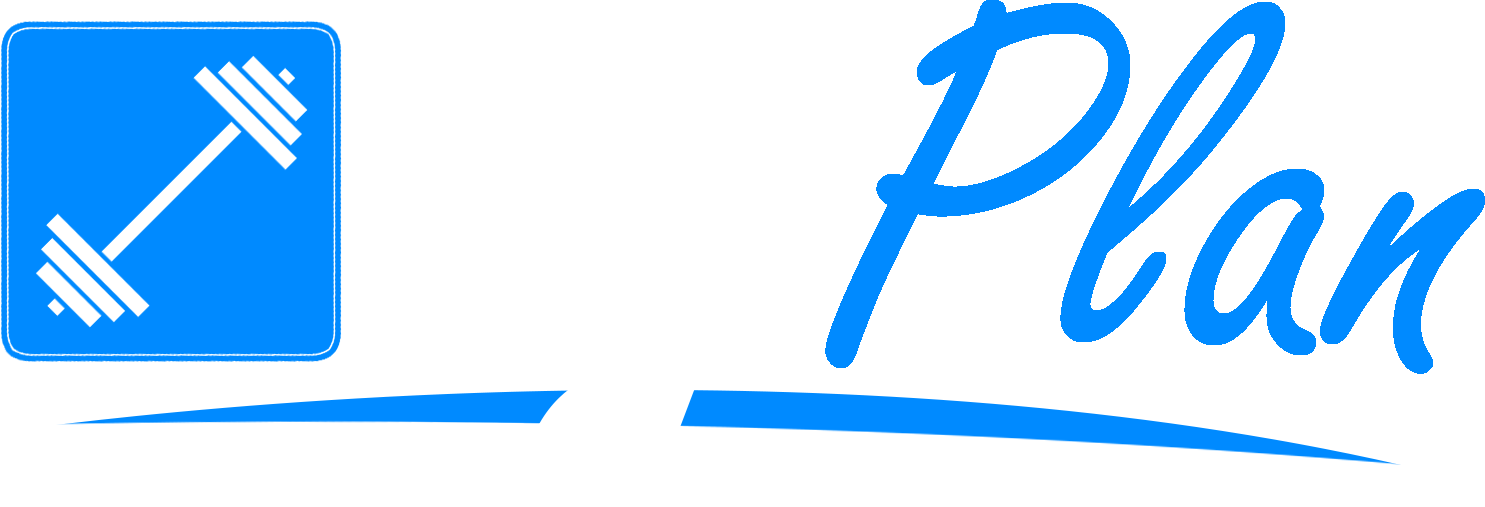
<style>
.page{position:relative;width:1485px;height:507px;background:#ffffff}
.page>*{position:absolute;margin:0}
.t1{font:550px "FreestyleScript-Regular";color:#008aff;scale:1.05 1}
.t2{font:550px "FreestyleScript-Regular";color:#ffffff;scale:1.05 1}
</style>
<div class="page">
<p class="t1" style="left:393px;top:0px;width:1092px;height:507px"><span class="t2">my</span>Plan</p>
</div>
